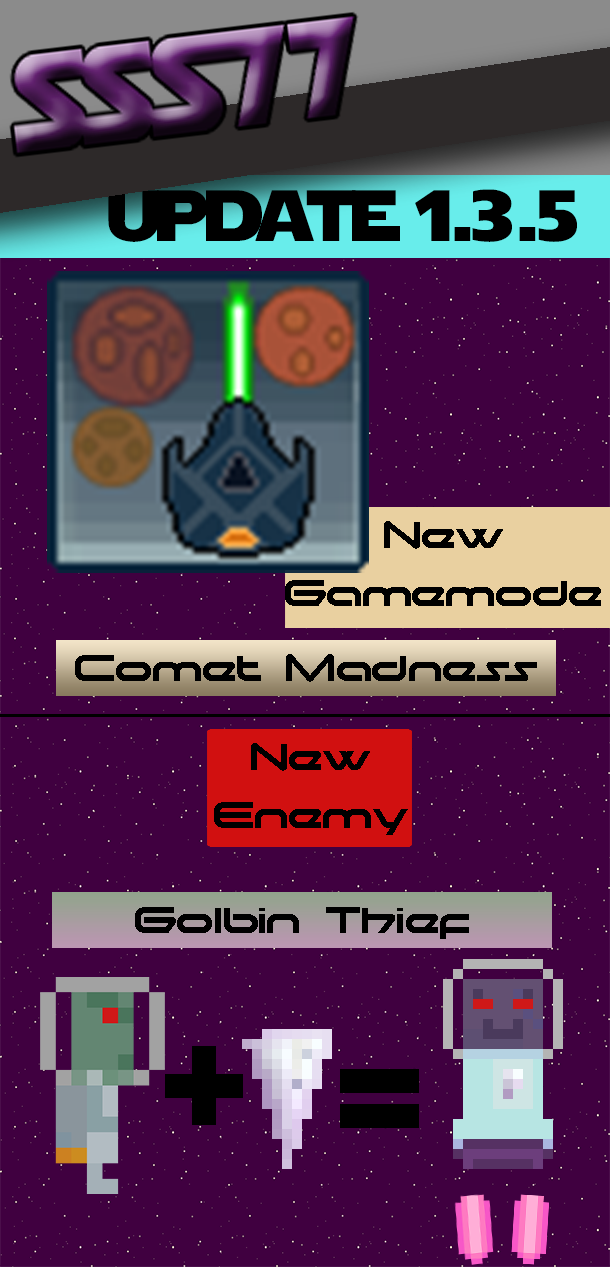
<style>
.page{position:relative;width:610px;height:1267px;background:#400040}
.page>*{position:absolute;margin:0}
.t1{font:72px "StarJedi";color:#000000}
.t2{font:48px "moonhouse";color:#000000}
.t3{font:200px "moonhouse";color:#000000}
</style>
<div class="page">
<p class="t1" style="left:108px;top:189px;width:469px;height:53px">update 1.3.5</p>
<p class="t2" style="left:285px;top:521px;width:316px;height:85px;text-align:center">New<br>Gamemode</p>
<p class="t2" style="left:75px;top:654px;width:462px;height:28px">Comet Madness</p>
<p class="t2" style="left:214px;top:743px;width:194px;height:92px;text-align:center">New<br>Enemy</p>
<p class="t2" style="left:135px;top:907px;width:334px;height:32px">Golbin Thief</p>
<p class="t3" style="left:165px;top:1046px;width:78px;height:79px">+</p>
<p class="t3" style="left:340px;top:1069px;width:79px;height:59px">=</p>
</div>
